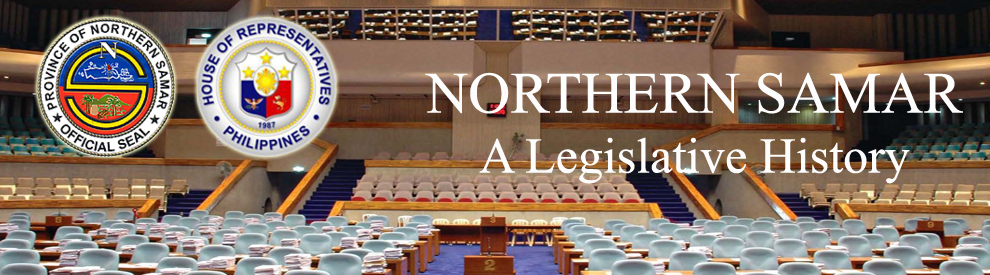
<style>
.page{position:relative;width:990px;height:275px}
.page>*{position:absolute;margin:0}
.t1{font:50px "TimesNewRomanPSMT";color:#fdfcfc}
.t2{font:58.3px "TimesNewRomanPSMT";color:#fdfdfd}
</style>
<div class="page">
<p class="t1" style="left:425px;top:72px;width:538px;height:112px;text-align:center"><span class="t2">NORTHERN SAMAR<br></span>A Legislative History</p>
</div>
